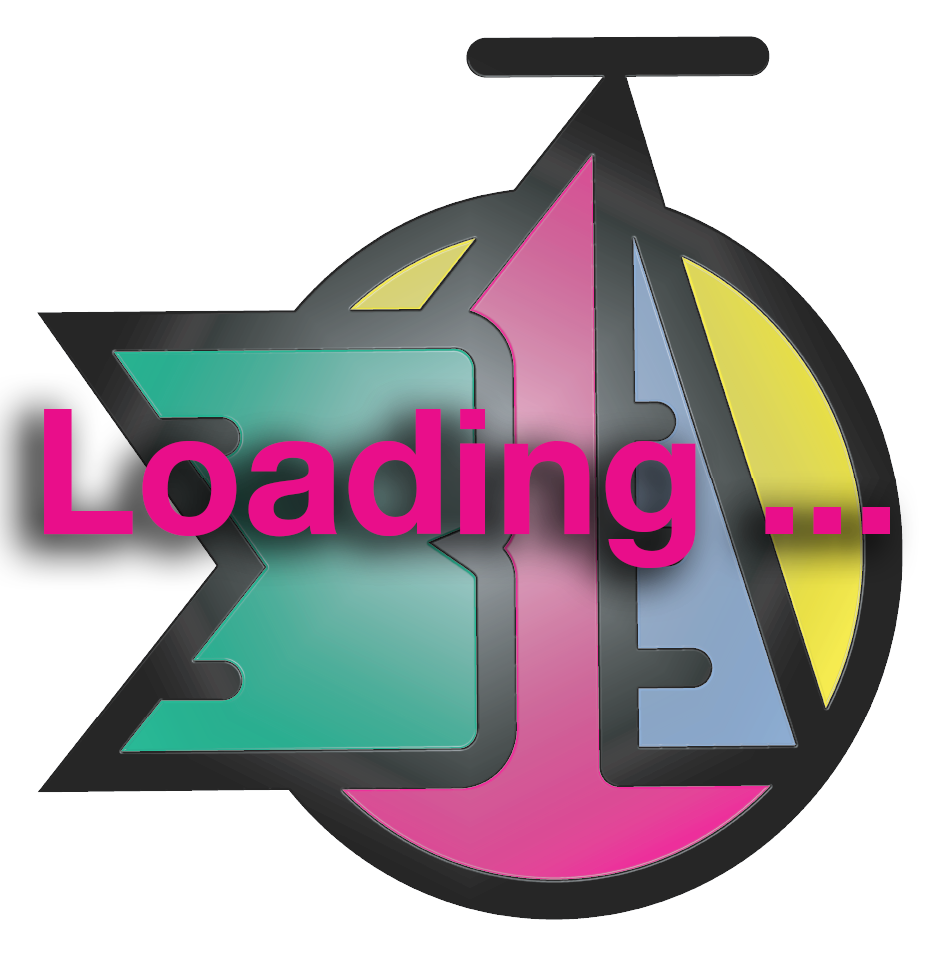
<style>
.page{position:relative;width:939px;height:956px;background:#ffffff}
.page>*{position:absolute;margin:0}
.t1{font:175px "HelveticaNeue-Bold";color:#e90e8a}
</style>
<div class="page">
<p class="t1" style="left:44px;top:409px;width:846px;height:159px">Loading ...</p>
</div>
